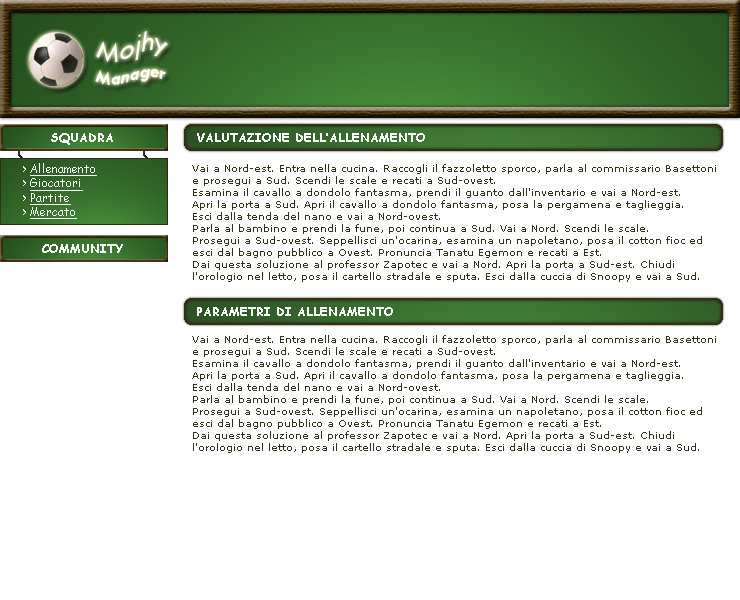
<style>
.page{position:relative;width:740px;height:600px;background:#ffffff}
.page>*{position:absolute;margin:0}
.t1{font:30px "TwCenMT-Italic";color:#ffffff}
.t2{font:20px "TwCenMT-Italic";color:#ffffff}
.t3{font:12px "ComicSansMS-Bold";color:#ffffff}
.t4{font:12px "ComicSansMS";color:#ffffff;text-decoration:underline}
.t5{font:12px "ComicSansMS";color:#ffffff}
.t6{font:10px "Verdana";color:#313018}
</style>
<div class="page">
<p class="t1" style="left:96px;top:31px;width:72px;height:31px">Mojhy</p>
<p class="t2" style="left:95px;top:69px;width:71px;height:16px">Manager</p>
<p class="t3" style="left:51px;top:133px;width:62px;height:12px">SQUADRA</p>
<p class="t3" style="left:197px;top:133px;width:228px;height:9px">VALUTAZIONE DELL’ALLENAMENTO</p>
<p class="t4" style="left:23px;top:163px;width:74px;height:56px"><span class="t5">&gt; </span>Allenamento<br><span class="t5">&gt; </span>Giocatori<br><span class="t5">&gt; </span>Partite<br><span class="t5">&gt; </span>Mercato</p>
<p class="t6" style="left:192px;top:164px;width:524px;height:118px">Vai a Nord-est. Entra nella cucina. Raccogli il fazzoletto sporco, parla al commissario Basettoni<br>e prosegui a Sud. Scendi le scale e recati a Sud-ovest.<br>Esamina il cavallo a dondolo fantasma, prendi il guanto dall'inventario e vai a Nord-est.<br>Apri la porta a Sud. Apri il cavallo a dondolo fantasma, posa la pergamena e taglieggia.<br>Esci dalla tenda del nano e vai a Nord-ovest.<br>Parla al bambino e prendi la fune, poi continua a Sud. Vai a Nord. Scendi le scale.<br>Prosegui a Sud-ovest. Seppellisci un'ocarina, esamina un napoletano, posa il cotton fioc ed<br>esci dal bagno pubblico a Ovest. Pronuncia Tanatu Egemon e recati a Est.<br>Dai questa soluzione al professor Zapotec e vai a Nord. Apri la porta a Sud-est. Chiudi<br>l'orologio nel letto, posa il cartello stradale e sputa. Esci dalla cuccia di Snoopy e vai a Sud.</p>
<p class="t3" style="left:42px;top:244px;width:81px;height:9px">COMMUNITY</p>
<p class="t3" style="left:197px;top:307px;width:196px;height:9px">PARAMETRI DI ALLENAMENTO</p>
<p class="t6" style="left:192px;top:335px;width:524px;height:118px">Vai a Nord-est. Entra nella cucina. Raccogli il fazzoletto sporco, parla al commissario Basettoni<br>e prosegui a Sud. Scendi le scale e recati a Sud-ovest.<br>Esamina il cavallo a dondolo fantasma, prendi il guanto dall'inventario e vai a Nord-est.<br>Apri la porta a Sud. Apri il cavallo a dondolo fantasma, posa la pergamena e taglieggia.<br>Esci dalla tenda del nano e vai a Nord-ovest.<br>Parla al bambino e prendi la fune, poi continua a Sud. Vai a Nord. Scendi le scale.<br>Prosegui a Sud-ovest. Seppellisci un'ocarina, esamina un napoletano, posa il cotton fioc ed<br>esci dal bagno pubblico a Ovest. Pronuncia Tanatu Egemon e recati a Est.<br>Dai questa soluzione al professor Zapotec e vai a Nord. Apri la porta a Sud-est. Chiudi<br>l'orologio nel letto, posa il cartello stradale e sputa. Esci dalla cuccia di Snoopy e vai a Sud.</p>
</div>
